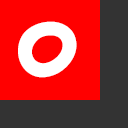
<style>
.page{position:relative;width:128px;height:128px;background:#ff0000}
.page>*{position:absolute;margin:0}
.t1{font:96.2px "Mabook";letter-spacing:0.075em;color:#ffffff}
</style>
<div class="page">
<p class="t1" style="left:18px;top:21px;width:59px;height:57px">0</p>
</div>
